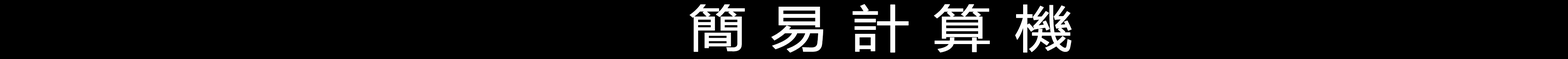
<style>
.page{position:relative;width:1568px;height:59px;background:#000000}
.page>*{position:absolute;margin:0}
.t1{font:49px "MicrosoftYaHei";letter-spacing:0.4em;color:#ffffff;font-weight:bold;scale:1.16 1}
</style>
<div class="page">
<p class="t1" style="left:690px;top:4px;width:382px;height:49px">簡易計算機</p>
</div>
